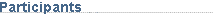
<style>
.page{position:relative;width:215px;height:14px;background:#ffffff}
.page>*{position:absolute;margin:0}
.t1{font:14px "Arial-BoldMT";color:#456689}
</style>
<div class="page">
<p class="t1" style="left:0px;top:2px;width:81px;height:13px">Participants</p>
</div>
